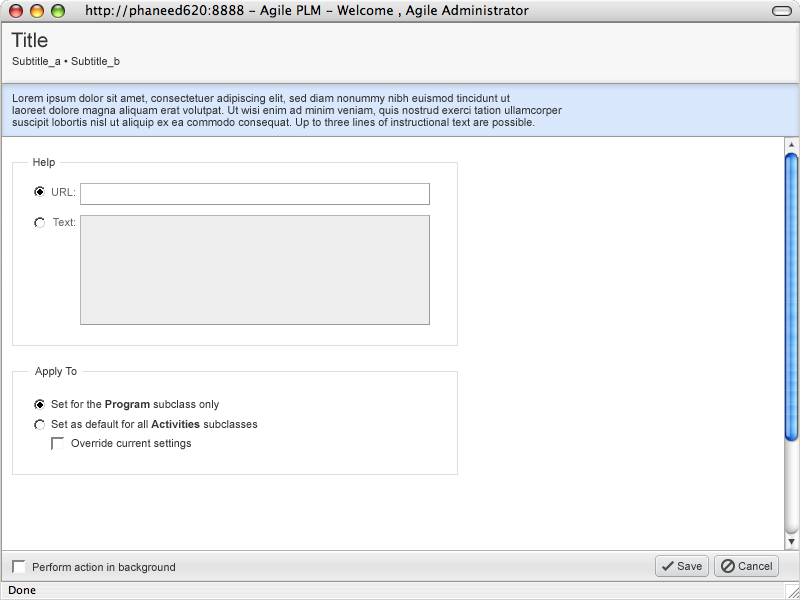
<style>
.page{position:relative;width:800px;height:600px;background:#ffffff}
.page>*{position:absolute;margin:0}
.t1{font:20px "ArialMT";color:#333333}
.t2{font:11px "ArialMT";color:#333333}
.t3{font:11px/12px "ArialMT";color:#333333}
.t4{font:11px "ArialMT";color:#666666}
.t5{font:11px "Arial-BoldMT";color:#333333}
</style>
<div class="page">
<p class="t1" style="left:11px;top:32px;width:37px;height:16px">Title</p>
<p class="t2" style="left:12px;top:57px;width:108px;height:11px">Subtitle_a • Subtitle_b</p>
<p class="t3" style="left:12px;top:94px;width:550px;height:35px">Lorem ipsum dolor sit amet, consectetuer adipiscing elit, sed diam nonummy nibh euismod tincidunt ut <br>laoreet dolore magna aliquam erat volutpat. Ut wisi enim ad minim veniam, quis nostrud exerci tation ullamcorper <br>suscipit lobortis nisl ut aliquip ex ea commodo consequat. Up to three lines of instructional text are possible.</p>
<p class="t2" style="left:33px;top:158px;width:22px;height:11px">Help</p>
<p class="t4" style="left:52px;top:188px;width:23px;height:8px">URL:</p>
<p class="t4" style="left:53px;top:218px;width:22px;height:8px">Text:</p>
<p class="t2" style="left:35px;top:367px;width:42px;height:11px">Apply To</p>
<p class="t2" style="left:51px;top:400px;width:168px;height:11px">Set for the <span class="t5">Program</span> subclass only</p>
<p class="t2" style="left:51px;top:420px;width:207px;height:8px">Set as default for all <span class="t5">Activities</span> subclasses</p>
<p class="t2" style="left:71px;top:439px;width:120px;height:11px">Override current settings</p>
<p class="t2" style="left:33px;top:563px;width:142px;height:11px">Perform action in background</p>
<p class="t2" style="left:677px;top:562px;width:25px;height:8px">Save</p>
<p class="t2" style="left:738px;top:562px;width:34px;height:8px">Cancel</p>
</div>
